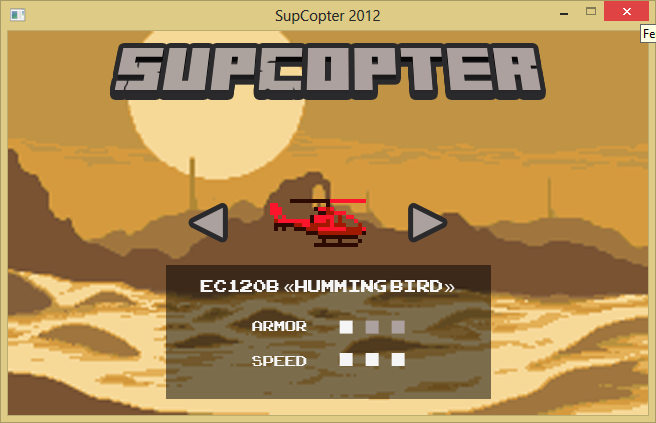
<style>
.page{position:relative;width:656px;height:423px}
.page>*{position:absolute;margin:0}
.t1{font:24px "ArcadeClassic";color:#f5f5f5}
.t2{font:24px "SegoeUI";color:#f5f5f5}
.t3{font:20px "ArcadeClassic";color:#f5f5f5}
</style>
<div class="page">
<p class="t1" style="left:200px;top:280px;width:255px;height:12px">EC120B <span class="t2">«</span>Humming Bird<span class="t2">»</span></p>
<p class="t3" style="left:252px;top:321px;width:55px;height:10px">ARMOR</p>
<p class="t3" style="left:252px;top:356px;width:55px;height:10px">SPEED</p>
</div>
